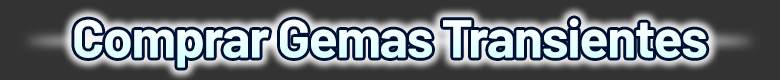
<style>
.page{position:relative;width:780px;height:80px;background:#333333}
.page>*{position:absolute;margin:0}
.t1{font:53.3px "Barlow-Bold";letter-spacing:-0.025em;color:#e9ffff}
</style>
<div class="page">
<p class="t1" style="left:74px;top:18px;width:633px;height:50px">Comprar Gemas Transientes</p>
</div>
